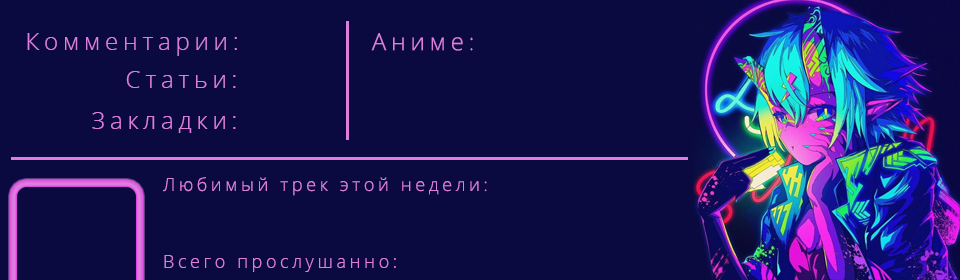
<style>
.page{position:relative;width:960px;height:280px;background:#0a0a41}
.page>*{position:absolute;margin:0}
.t1{font:24px "OpenSans-Light";letter-spacing:0.2em;color:#dd7edf}
.t2{font:18px "OpenSans-Light";letter-spacing:0.2em;color:#dd7edf}
</style>
<div class="page">
<p class="t1" style="left:27px;top:33px;width:210px;height:23px">Комментарии:</p>
<p class="t1" style="left:371px;top:33px;width:102px;height:18px">Аниме:</p>
<p class="t1" style="left:126px;top:71px;width:110px;height:17px">Статьи:</p>
<p class="t1" style="left:92px;top:112px;width:144px;height:21px">Закладки:</p>
<p class="t2" style="left:163px;top:177px;width:324px;height:19px">Любимый трек этой недели:</p>
<p class="t2" style="left:164px;top:255px;width:232px;height:17px">Всего прослушанно:</p>
</div>
